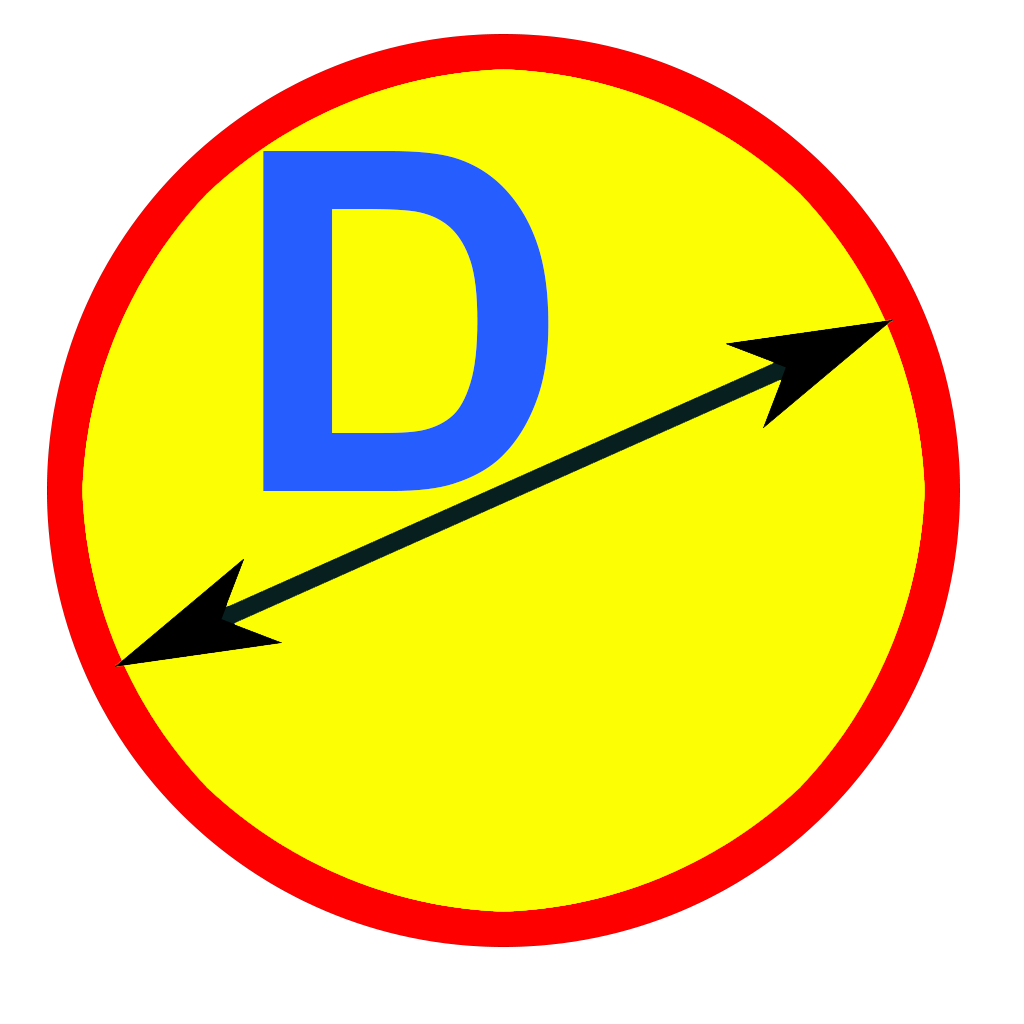
<style>
.page{position:relative;width:1024px;height:1024px;background:#fcfe04}
.page>*{position:absolute;margin:0}
.t1{font:475px "Arial-BoldMT";color:#255dff;text-transform:uppercase}
</style>
<div class="page">
<p class="t1" style="left:263px;top:151px;width:286px;height:340px">D</p>
</div>
